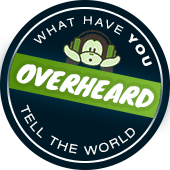
<style>
.page{position:relative;width:170px;height:170px;background:#001926}
.page>*{position:absolute;margin:0}
.t1{font:11px "HelveticaNeueLTPro-Ex";letter-spacing:0.18em;color:#ffffff;text-transform:uppercase}
.t2{font:11px "HelveticaNeueLTPro-HvEx";letter-spacing:0.18em;color:#ffffff;text-transform:uppercase}
.t3{font:24px "Knewave-Regular";color:#ffffff;text-transform:uppercase;scale:1.12 1}
.t4{font:12px "HelveticaNeueLTPro-Ex";letter-spacing:0.18em;color:#ffffff;text-transform:uppercase}
</style>
<div class="page">
<p class="t1" style="left:33px;top:16px;width:119px;height:50px;rotate:12deg">what have <span class="t2">you</span></p>
<p class="t3" style="left:16px;top:64px;width:138px;height:44px;rotate:12deg">overheard</p>
<p class="t4" style="left:21px;top:104px;width:114px;height:51px;rotate:12deg">tell the world</p>
</div>
